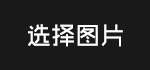
<style>
.page{position:relative;width:150px;height:70px;background:#191919}
.page>*{position:absolute;margin:0}
.t1{font:24px "RTWSShangGoG0v1-Regular";letter-spacing:0.022em;color:#ffffff}
</style>
<div class="page">
<p class="t1" style="left:28px;top:24px;width:95px;height:23px">选择图片</p>
</div>
